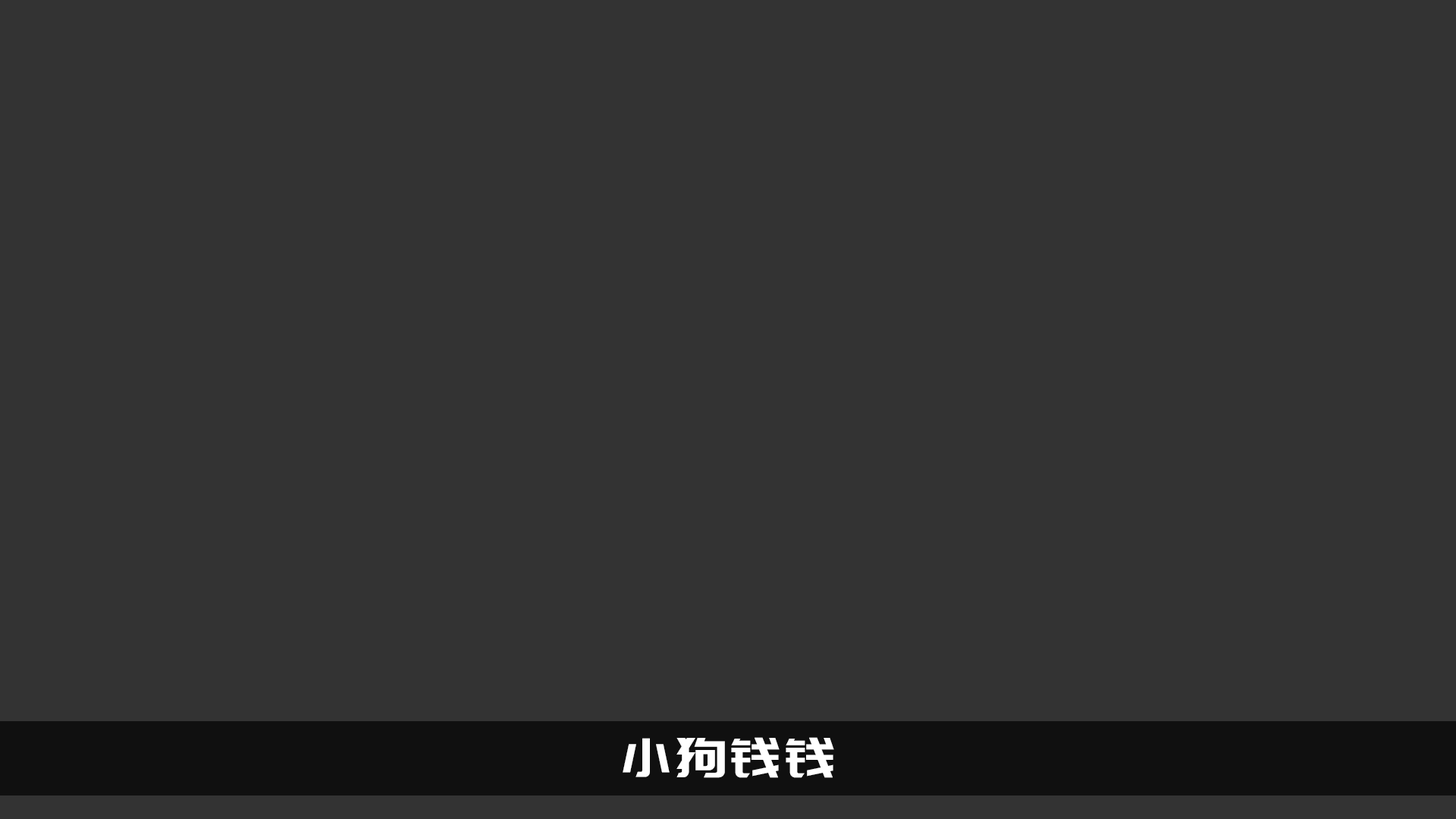
<style>
.page{position:relative;width:1456px;height:819px;background:#333333}
.page>*{position:absolute;margin:0}
.t1{font:54.6px "PangMenZhengDao-3";color:#ffffff}
</style>
<div class="page">
<p class="t1" style="left:623px;top:737px;width:211px;height:41px">小狗钱钱</p>
</div>
